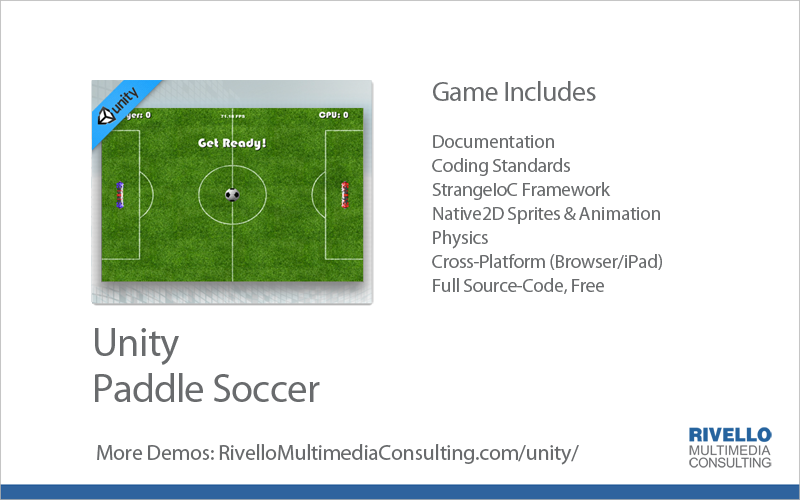
<style>
.page{position:relative;width:800px;height:500px;background:#ffffff}
.page>*{position:absolute;margin:0}
.t1{font:19.4px/23.9px "MyriadPro-Regular";letter-spacing:-0.02em;color:#696b6d}
.t2{font:27.8px/23.9px "MyriadPro-Regular";letter-spacing:-0.02em;color:#696b6d}
.t3{font:40.6px/46.7px "MyriadPro-Regular";letter-spacing:-0.02em;color:#696b6d}
.t4{font:22.2px "MyriadPro-Regular";letter-spacing:-0.02em;color:#696b6d}
</style>
<div class="page">
<p class="t1" style="left:432px;top:81px;width:230px;height:213px"><span class="t2">Game Includes <br></span><br>Documentation<br>Coding Standards<br>StrangeIoC Framework<br>Native2D Sprites &amp; Animation<br>Physics<br>Cross-Platform (Browser/iPad)<br>Full Source-Code, Free</p>
<p class="t3" style="left:95px;top:328px;width:225px;height:74px">Unity  <br>Paddle Soccer</p>
<p class="t4" style="left:97px;top:444px;width:482px;height:21px">More Demos: RivelloMultimediaConsulting.com/unity/</p>
</div>
